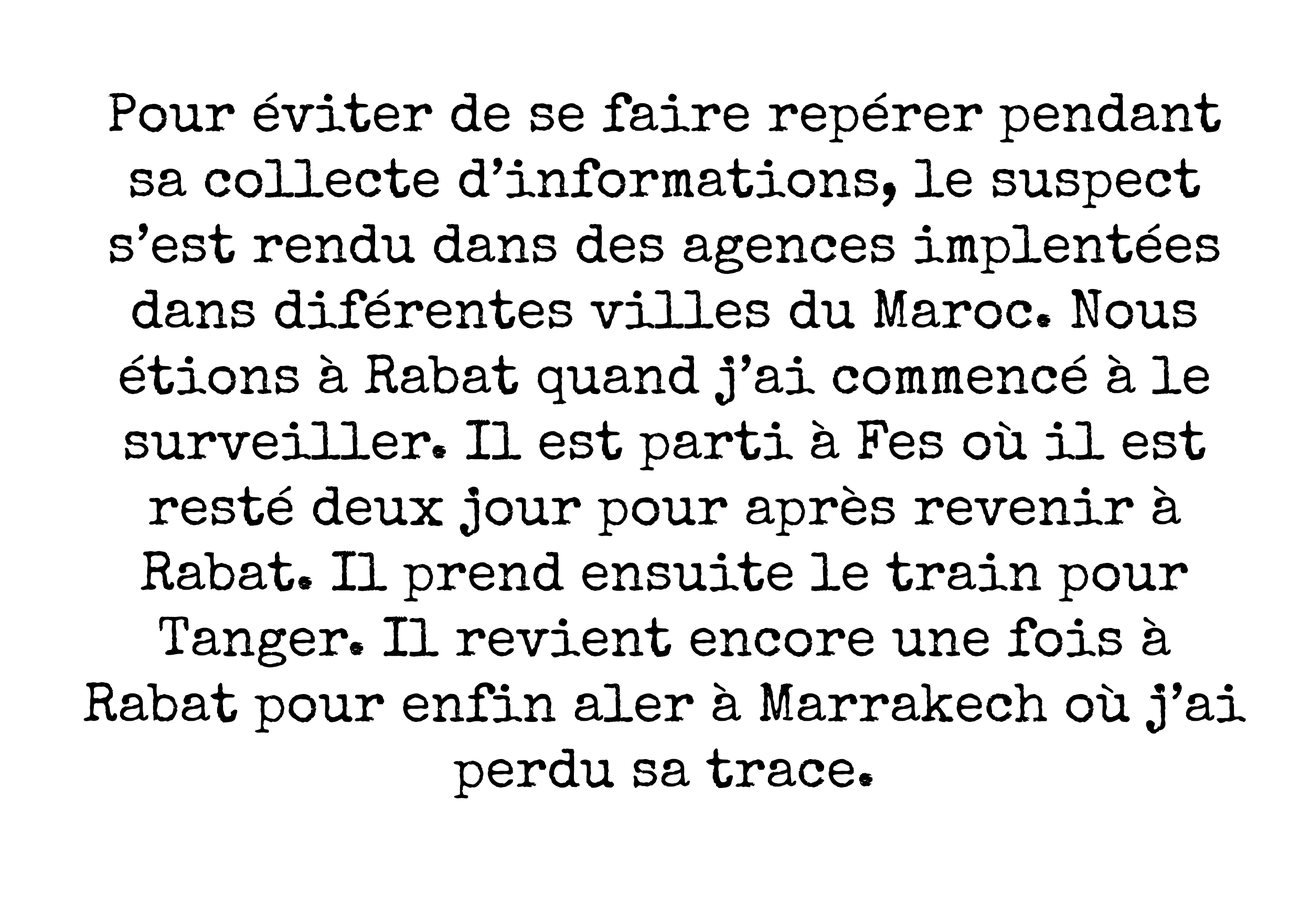
<style>
.page{position:relative;width:1301px;height:917px;background:#ffffff}
.page>*{position:absolute;margin:0}
.t1{font:54.6px "SpecialElite-Regular";color:#000000}
</style>
<div class="page">
<p class="t1" style="left:83px;top:92px;width:1163px;height:706px;text-align:center">Pour éviter de se faire repérer pendant sa collecte d’informations, le suspect s’est rendu dans des agences implentées dans diférentes villes du Maroc. Nous étions à Rabat quand j’ai commencé à le surveiller. Il est parti à Fes où il est resté deux jour pour après revenir à Rabat. Il prend ensuite le train pour Tanger. Il revient encore une fois à Rabat pour enfin aler à Marrakech où j’ai perdu sa trace.</p>
</div>
